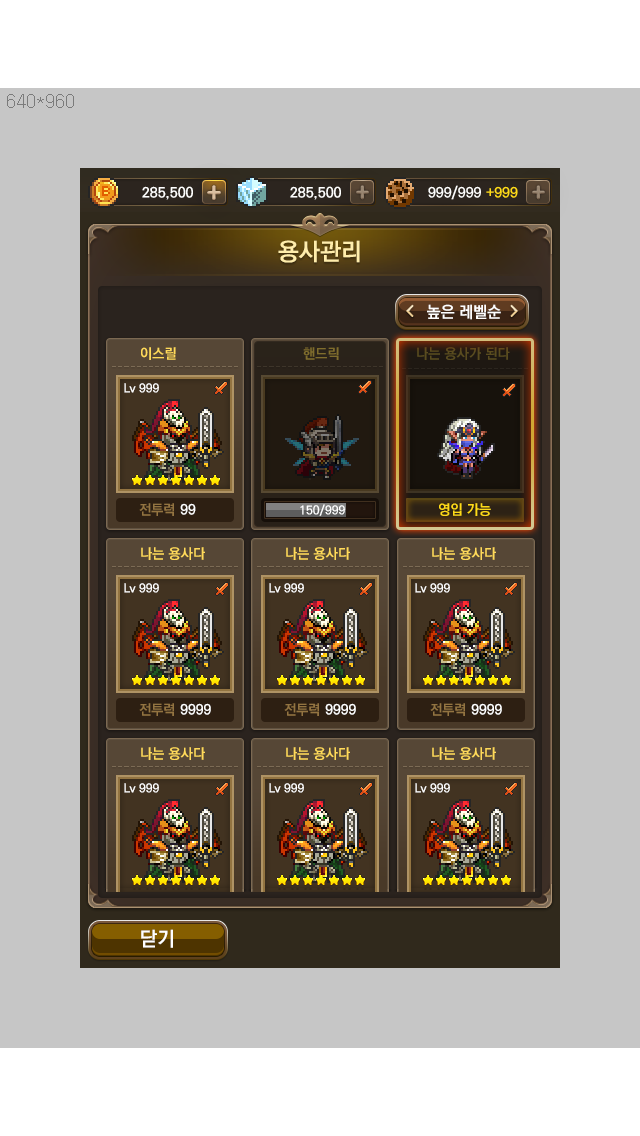
<style>
.page{position:relative;width:640px;height:1136px;background:#c6c6c6}
.page>*{position:absolute;margin:0}
.t1{font:24px "KoPubDotumBold";color:#ffedab}
.t2{font:16px "KoPubDotumBold";color:#ffffff}
.t3{font:14px "KoPubDotumBold";color:#ffda5a}
.t4{font:14px "KoPubDotumBold";color:#7f6d2d}
.t5{font:14px "KoPubDotumBold";color:#5a4c1f}
.t6{font:12px "KoPubDotumBold";color:#ffffff}
.t7{font:14px "KoPubDotumBold";color:#937441}
.t8{font:14px "KoPubDotumBold";color:#ffffff}
.t9{font:14px "KoPubDotumBold";color:#ffdb18}
.t10{font:20px "KoPubDotumBold";color:#ffffff}
</style>
<div class="page">
<p class="t1" style="left:278px;top:240px;width:82px;height:23px">용사관리</p>
<p class="t2" style="left:427px;top:304px;width:74px;height:16px">높은 레벨순</p>
<p class="t3" style="left:141px;top:347px;width:35px;height:13px">이스릴</p>
<p class="t4" style="left:303px;top:347px;width:36px;height:13px">핸드릭</p>
<p class="t5" style="left:417px;top:347px;width:93px;height:13px">나는 용사가 된다</p>
<p class="t6" style="left:124px;top:383px;width:35px;height:10px">Lv 999</p>
<p class="t7" style="left:139px;top:503px;width:35px;height:13px">전투력</p>
<p class="t8" style="left:180px;top:503px;width:16px;height:12px">99</p>
<p class="t6" style="left:300px;top:504px;width:45px;height:12px">150/999</p>
<p class="t9" style="left:439px;top:503px;width:52px;height:13px">영입 가능</p>
<p class="t10" style="left:141px;top:929px;width:32px;height:19px">닫기</p>
</div>
